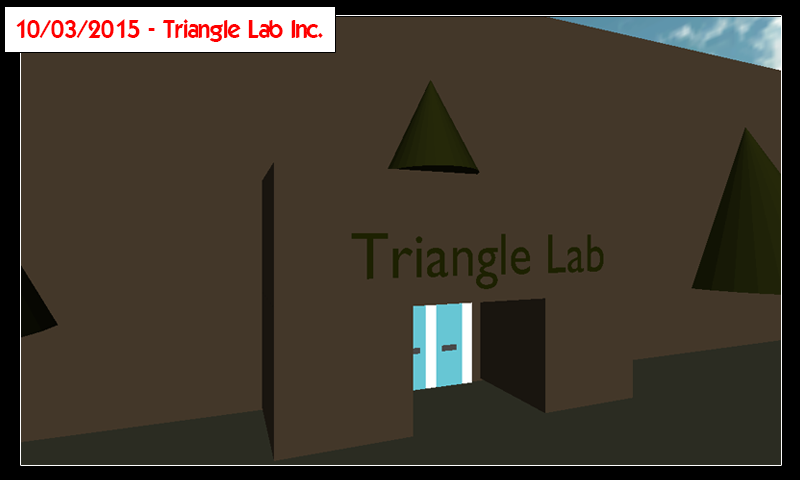
<style>
.page{position:relative;width:800px;height:480px;background:#433729}
.page>*{position:absolute;margin:0}
.t1{font:24px "ELEGANCE";color:#ff0000}
</style>
<div class="page">
<p class="t1" style="left:16px;top:19px;width:307px;height:23px">10/03/2015 - Triangle Lab Inc.</p>
</div>
